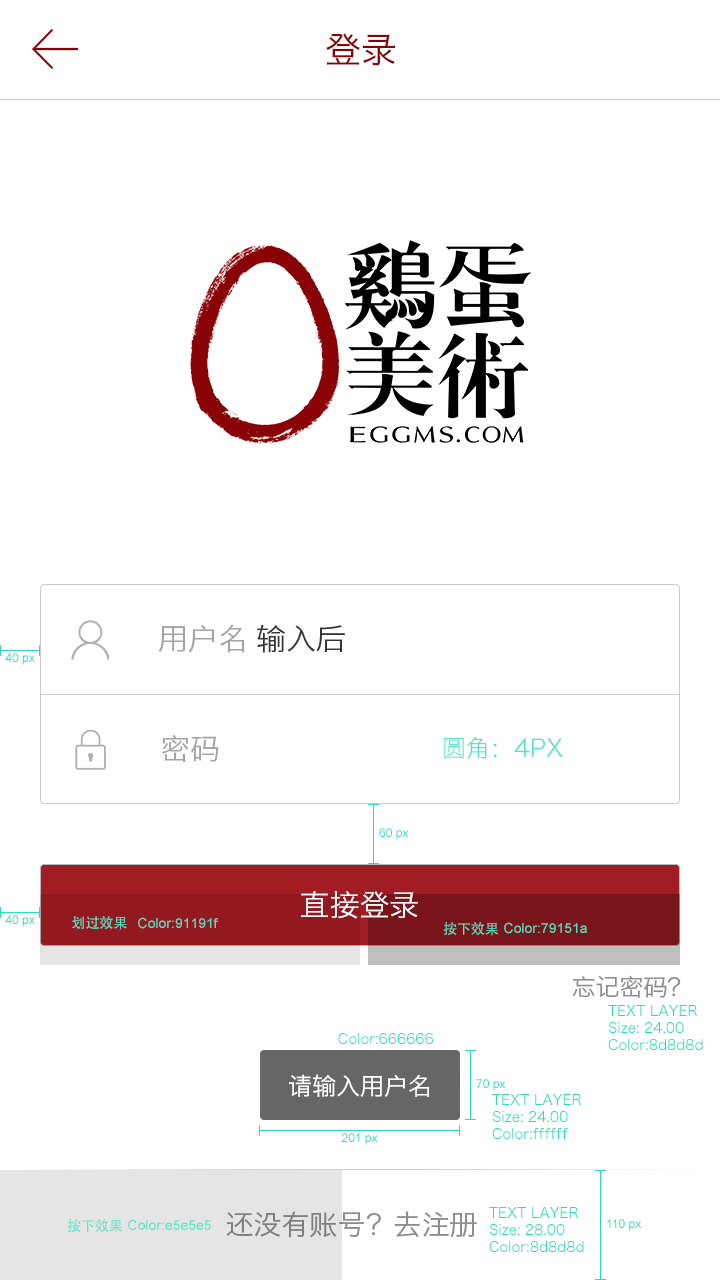
<style>
.page{position:relative;width:720px;height:1280px;background:#ffffff}
.page>*{position:absolute;margin:0}
.t1{font:36px "HiraginoSansGB-W3";color:#8a0105}
.t2{font:30px "HiraginoSansGB-W3";color:#a3a3a3}
.t3{font:30px "HiraginoSansGB-W3";color:#343434}
.t4{font:12px "ArialMT";color:#28ddb9}
.t5{font:24px "HiraginoSansGB-W3";color:#53e4c7}
.t6{font:30px "HiraginoSansGB-W3";color:#ffffff}
.t7{font:14px "AdobeHeitiStd-Regular";color:#53e4c7}
.t8{font:14px "ArialMT";color:#53e4c7}
.t9{font:24px "HiraginoSansGB-W3";color:#8d8d8d}
.t10{font:14px "HiraginoSansGB-W3";color:#28ddb9}
.t11{font:24px "HiraginoSansGB-W3";color:#ffffff}
.t12{font:28px "HiraginoSansGB-W3";color:#8d8d8d}
</style>
<div class="page">
<p class="t1" style="left:326px;top:33px;width:70px;height:33px">登录</p>
<p class="t2" style="left:158px;top:624px;width:87px;height:29px">用户名</p>
<p class="t3" style="left:257px;top:624px;width:88px;height:29px">输入后</p>
<p class="t4" style="left:5px;top:653px;width:30px;height:12px">40 px</p>
<p class="t2" style="left:162px;top:735px;width:57px;height:27px">密码</p>
<p class="t5" style="left:444px;top:736px;width:119px;height:23px">圆角：4PX</p>
<p class="t4" style="left:379px;top:828px;width:30px;height:12px">60 px</p>
<p class="t6" style="left:301px;top:891px;width:117px;height:28px">直接登录</p>
<p class="t4" style="left:5px;top:915px;width:30px;height:12px">40 px</p>
<p class="t7" style="left:72px;top:916px;width:55px;height:14px">划过效果</p>
<p class="t8" style="left:138px;top:917px;width:80px;height:12px">Color:91191f</p>
<p class="t7" style="left:443px;top:922px;width:55px;height:14px">按下效果</p>
<p class="t8" style="left:504px;top:922px;width:83px;height:12px">Color:79151a</p>
<p class="t9" style="left:572px;top:975px;width:109px;height:23px">忘记密码?</p>
<p class="t10" style="left:608px;top:1005px;width:95px;height:45px">TEXT LAYER<br>Size: 24.00<br>Color:8d8d8d</p>
<p class="t10" style="left:338px;top:1033px;width:95px;height:11px">Color:666666</p>
<p class="t11" style="left:289px;top:1074px;width:141px;height:23px">请输入用户名</p>
<p class="t4" style="left:476px;top:1079px;width:30px;height:12px">70 px</p>
<p class="t10" style="left:492px;top:1094px;width:89px;height:45px">TEXT LAYER<br>Size: 24.00<br>Color:ffffff</p>
<p class="t4" style="left:341px;top:1133px;width:37px;height:12px">201 px</p>
<p class="t12" style="left:226px;top:1211px;width:251px;height:27px">还没有账号？去注册</p>
<p class="t10" style="left:489px;top:1207px;width:95px;height:45px">TEXT LAYER<br>Size: 28.00<br>Color:8d8d8d</p>
<p class="t7" style="left:67px;top:1219px;width:55px;height:14px">按下效果</p>
<p class="t8" style="left:128px;top:1219px;width:83px;height:12px">Color:e5e5e5</p>
<p class="t4" style="left:607px;top:1219px;width:35px;height:12px">110 px</p>
</div>
